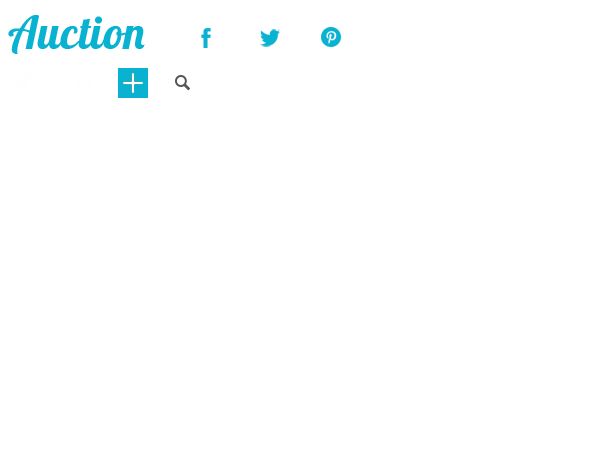
<style>
.page{position:relative;width:590px;height:450px;background:#ffffff}
.page>*{position:absolute;margin:0}
.t1{font:45px "Lobster-Regular";letter-spacing:0.01em;color:#0ab2d2}
</style>
<div class="page">
<p class="t1" style="left:8px;top:15px;width:137px;height:39px">Auction</p>
</div>
